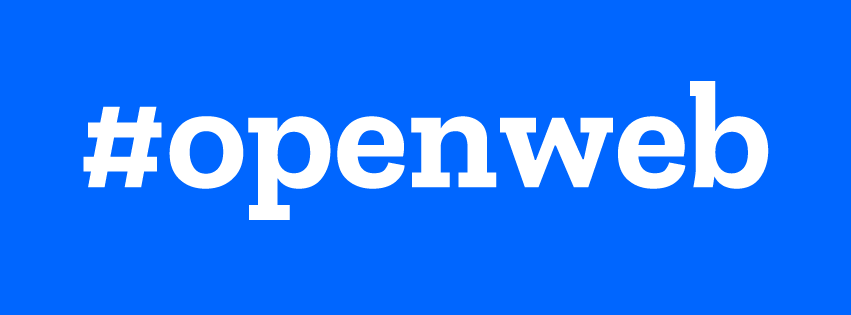
<style>
.page{position:relative;width:851px;height:315px;background:#0066ff}
.page>*{position:absolute;margin:0}
.t1{font:154.7px "ZillaSlabHighlight-Bold";color:#0066ff}
</style>
<div class="page">
<p class="t1" style="left:76px;top:45px;width:697px;height:176px">#openweb</p>
</div>
